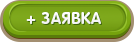
<style>
.page{position:relative;width:134px;height:42px}
.page>*{position:absolute;margin:0}
.t1{font:16px "RotondaC-Bold";letter-spacing:0.04em;color:#ffffff;text-transform:uppercase}
</style>
<div class="page">
<p class="t1" style="left:26px;top:12px;width:75px;height:12px">+ заявка</p>
</div>
